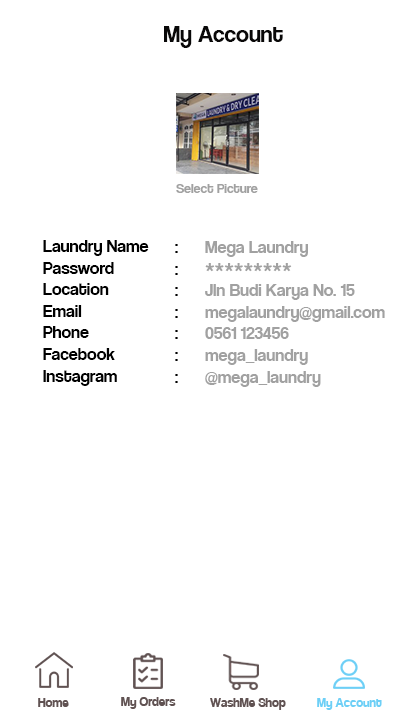
<style>
.page{position:relative;width:420px;height:720px;background:#ffffff}
.page>*{position:absolute;margin:0}
.t1{font:24px "CoolveticaRg-Regular";color:#090808}
.t2{font:14px "CoolveticaRg-Regular";color:#a1a1a1}
.t3{font:18px "CoolveticaRg-Regular";color:#000000}
.t4{font:18px "CoolveticaRg-Regular";color:#a1a1a1}
.t5{font:14px "Coolvetica-Regular";color:#605252}
.t6{font:14px "Coolvetica-Regular";color:#6dcff6}
</style>
<div class="page">
<p class="t1" style="left:164px;top:26px;width:119px;height:22px">My Account</p>
<p class="t2" style="left:176px;top:184px;width:82px;height:9px">Select Picture</p>
<p class="t3" style="left:43px;top:240px;width:106px;height:146px">Laundry Name<br>Password<br>Location<br>Email<br>Phone<br>Facebook<br>Instagram</p>
<p class="t3" style="left:175px;top:244px;width:3px;height:139px">:<br>:<br>:<br>:<br>:<br>:<br>:</p>
<p class="t4" style="left:205px;top:241px;width:180px;height:146px">Mega Laundry<br>*********<br>Jln Budi Karya No. 15<br>megalaundry@gmail.com<br>0561 123456<br>mega_laundry<br>@mega_laundry</p>
<p class="t5" style="left:38px;top:698px;width:31px;height:9px">Home</p>
<p class="t5" style="left:121px;top:697px;width:55px;height:12px">My Orders</p>
<p class="t5" style="left:210px;top:698px;width:76px;height:12px">WashMe Shop</p>
<p class="t6" style="left:317px;top:698px;width:65px;height:12px">My Account</p>
</div>
